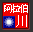
<style>
.page{position:relative;width:33px;height:32px;background:#f20000}
.page>*{position:absolute;margin:0}
.t1{font:10.4px "SimSun";letter-spacing:-0.25em;color:#ffffff}
.t2{font:11.7px "SimSun";color:#ffffff}
</style>
<div class="page">
<p class="t1" style="left:4px;top:4px;width:24px;height:9px">阿拉伯</p>
<p class="t2" style="left:16px;top:15px;width:11px;height:12px">川</p>
</div>
